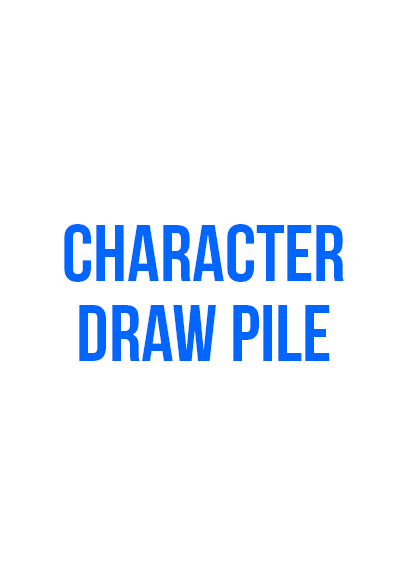
<style>
.page{position:relative;width:408px;height:585px;background:#ffffff}
.page>*{position:absolute;margin:0}
.t1{font:80px/80px "BebasNeue";color:#0066ff}
</style>
<div class="page">
<p class="t1" style="left:64px;top:224px;width:280px;height:137px;text-align:center">character<br>draw pile</p>
</div>
